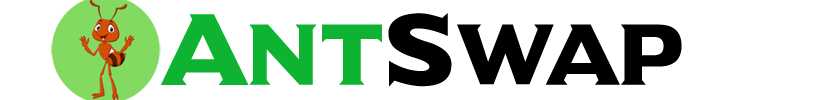
<style>
.page{position:relative;width:818px;height:100px;background:#ffffff}
.page>*{position:absolute;margin:0}
.t1{font:85px "UniversalSerif";color:#000000}
.t2{font:100px "UniversalSerif";color:#0eb331}
.t3{font:85px "UniversalSerif";color:#0eb331}
.t4{font:100px "UniversalSerif";color:#000000}
</style>
<div class="page">
<p class="t1" style="left:161px;top:13px;width:521px;height:74px"><span class="t2">A</span><span class="t3">NT</span><span class="t4">S</span>wap</p>
</div>
